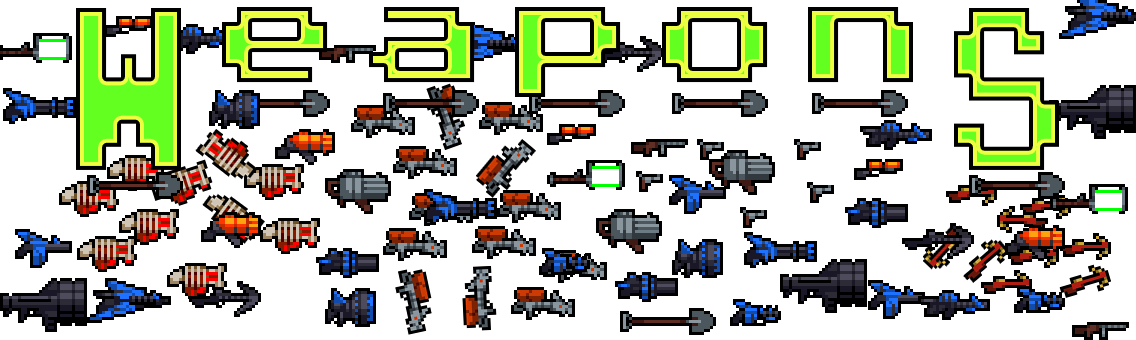
<style>
.page{position:relative;width:1136px;height:340px;background:#ffffff}
.page>*{position:absolute;margin:0}
.t1{font:120px "PressStart2P";letter-spacing:0.22em}
.t2{font:184.8px "PressStart2P";letter-spacing:0.22em;scale:0.65 1}
</style>
<div class="page">
<p class="t1" style="left:76px;top:7px;width:983px;height:163px"><span class="t2">W</span>eapon<span class="t2">S</span></p>
</div>
